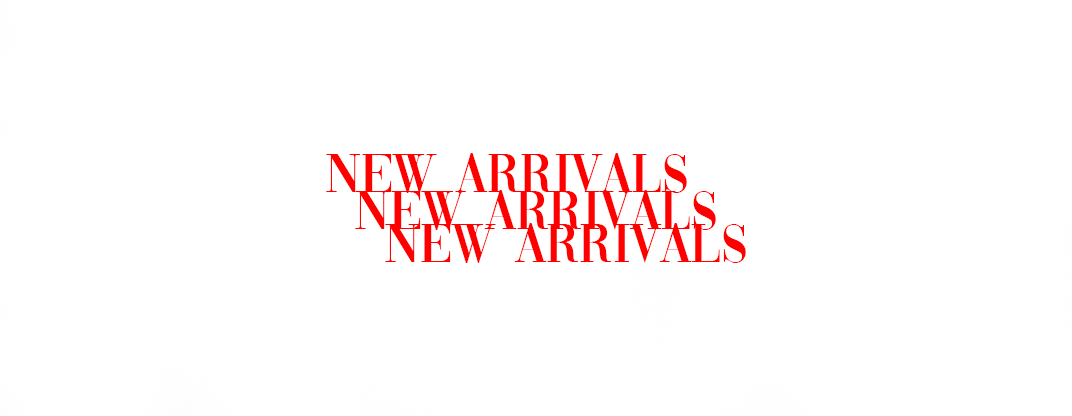
<style>
.page{position:relative;width:1072px;height:416px;background:#ffffff}
.page>*{position:absolute;margin:0}
.t1{font:57px "Vogue-Regular";color:#ff0000}
</style>
<div class="page">
<p class="t1" style="left:326px;top:153px;width:361px;height:40px">NEW ARRIVALS</p>
<p class="t1" style="left:355px;top:190px;width:361px;height:40px">NEW ARRIVALS</p>
<p class="t1" style="left:385px;top:223px;width:361px;height:40px">NEW ARRIVALS</p>
</div>
